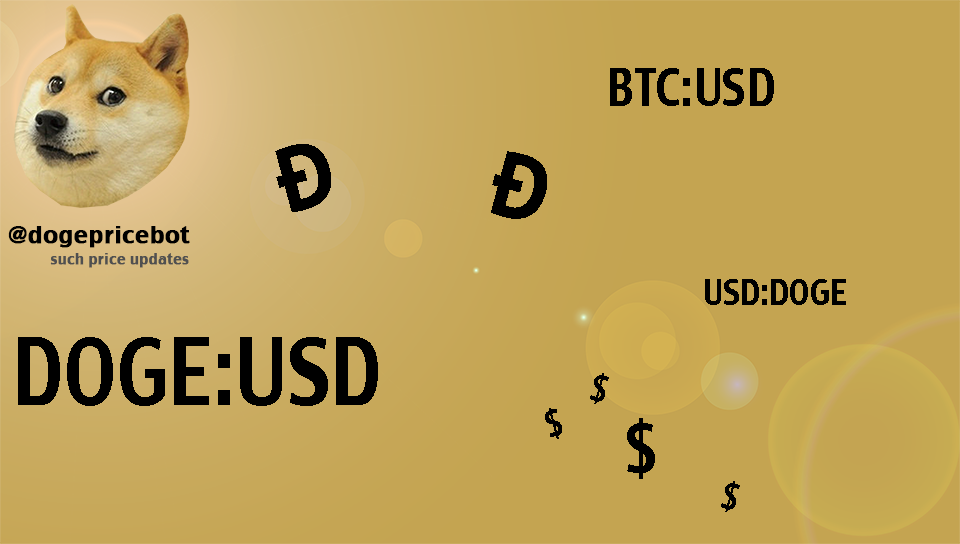
<style>
.page{position:relative;width:960px;height:544px;background:#c4a451}
.page>*{position:absolute;margin:0}
.t1{font:50px "CharcoalCY";color:#000000;scale:0.85 1}
.t2{font:95px "MyriadPro-Bold";color:#000000;scale:0.85 1}
.t3{font:23.1px "CharcoalCY";color:#000000;font-weight:bold}
.t4{font:14.2px "CharcoalCY";color:#505050;font-weight:bold}
.t5{font:35px "CharcoalCY";color:#000000;scale:0.85 1}
.t6{font:90px "CharcoalCY";color:#000000;scale:0.85 1}
.t7{font:66px "CharcoalCY";color:#000000;scale:0.85 1}
</style>
<div class="page">
<p class="t1" style="left:610px;top:68px;width:164px;height:38px">BTC:USD</p>
<p class="t2" style="left:275px;top:144px;width:56px;height:68px;rotate:-15deg">Ð</p>
<p class="t2" style="left:491px;top:151px;width:56px;height:68px;rotate:15deg">Ð</p>
<p class="t3" style="left:8px;top:226px;width:182px;height:22px">@dogepricebot</p>
<p class="t4" style="left:50px;top:253px;width:139px;height:15px">such price updates</p>
<p class="t5" style="left:705px;top:279px;width:141px;height:26px">USD:DOGE</p>
<p class="t6" style="left:18px;top:337px;width:360px;height:69px">DOGE:USD</p>
<p class="t5" style="left:590px;top:373px;width:19px;height:31px;rotate:15deg">$</p>
<p class="t5" style="left:545px;top:408px;width:17px;height:31px;rotate:-15deg">$</p>
<p class="t7" style="left:627px;top:418px;width:28px;height:61px">$</p>
<p class="t5" style="left:721px;top:481px;width:19px;height:31px;rotate:15deg">$</p>
</div>
